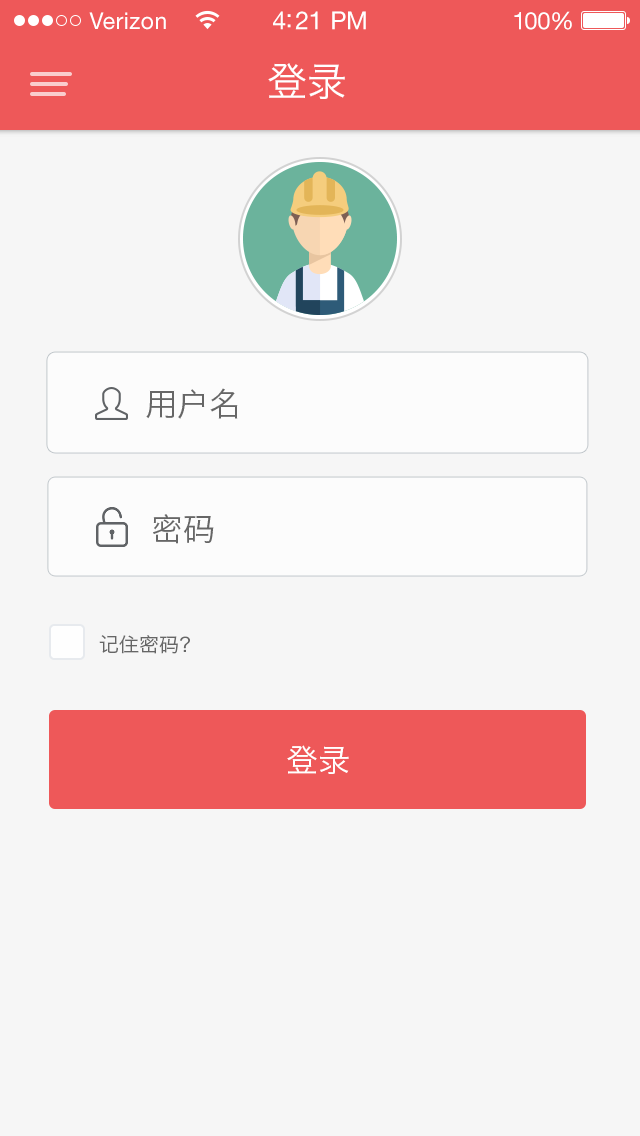
<style>
.page{position:relative;width:640px;height:1136px;background:#f6f6f6}
.page>*{position:absolute;margin:0}
.t1{font:23px "HelveticaNeueLTStd-Roman";letter-spacing:0.02em;color:#ffffff}
.t2{font:25px "HelveticaNeueLTStd-Roman";letter-spacing:-0.02em;color:#ffffff}
.t3{font:24px "HelveticaNeueLTStd-Roman";letter-spacing:-0.02em;color:#ffffff}
.t4{font:40px "HiraginoSansGB-W3";color:#ffffff}
.t5{font:32px "HiraginoSansGB-W3";color:#666666}
.t6{font:20px "HiraginoSansGB-W3";color:#666666}
.t7{font:32px "HiraginoSansGB-W3";color:#ffffff}
</style>
<div class="page">
<p class="t1" style="left:89px;top:12px;width:77px;height:18px">Verizon</p>
<p class="t2" style="left:273px;top:11px;width:93px;height:19px">4:21 PM</p>
<p class="t3" style="left:514px;top:11px;width:58px;height:19px">100%</p>
<p class="t4" style="left:268px;top:63px;width:77px;height:36px">登录</p>
<p class="t5" style="left:146px;top:388px;width:92px;height:31px">用户名</p>
<p class="t5" style="left:153px;top:514px;width:61px;height:30px">密码</p>
<p class="t6" style="left:99px;top:635px;width:91px;height:19px">记住密码？</p>
<p class="t7" style="left:287px;top:745px;width:62px;height:29px">登录</p>
</div>
